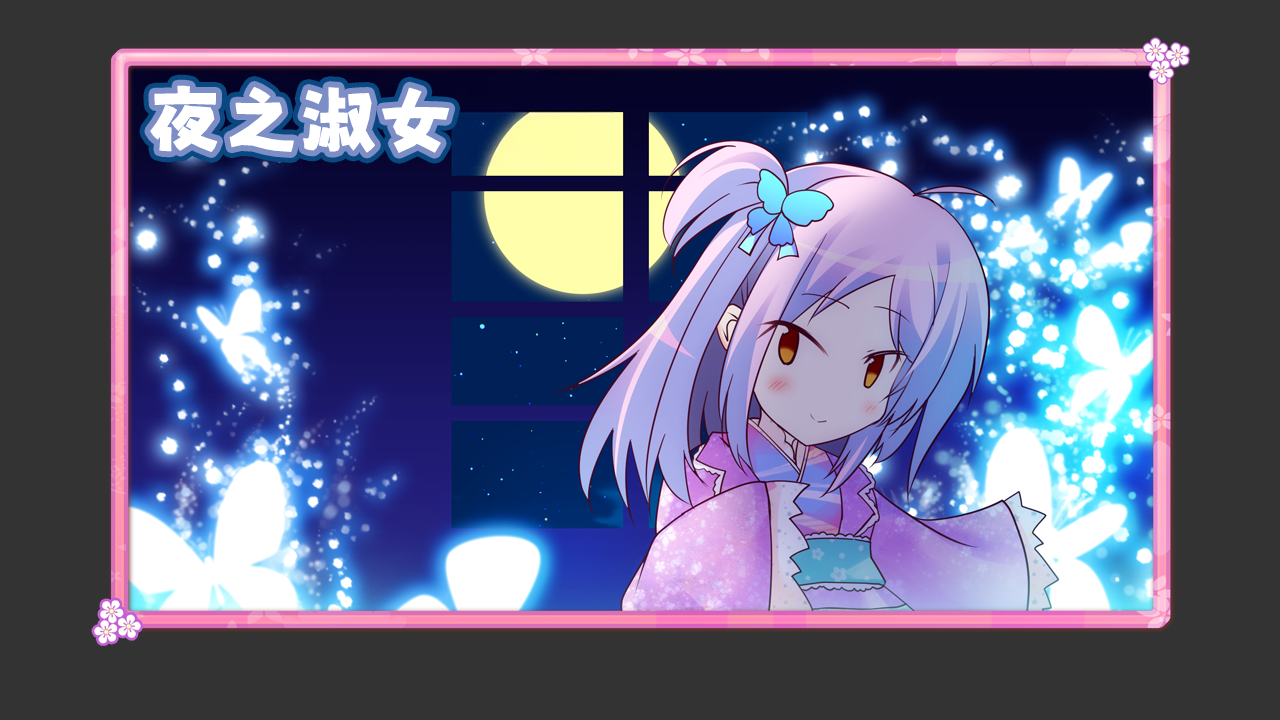
<style>
.page{position:relative;width:1280px;height:720px;background:#333333}
.page>*{position:absolute;margin:0}
.t1{font:75px "MaokenAssortedSans";color:#ffffff;font-weight:bold}
</style>
<div class="page">
<p class="t1" style="left:150px;top:85px;width:300px;height:68px">夜之淑女</p>
</div>
